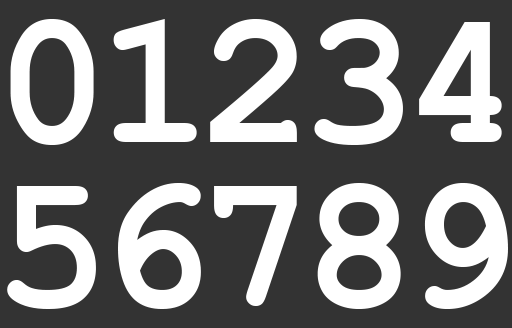
<style>
.page{position:relative;width:512px;height:328px;background:#333333}
.page>*{position:absolute;margin:0}
.t1{font:190px "CourierNewPS-BoldMT";color:#ffffff}
</style>
<div class="page">
<p class="t1" style="left:10px;top:19px;width:84px;height:126px">0</p>
<p class="t1" style="left:113px;top:19px;width:84px;height:123px">1</p>
<p class="t1" style="left:210px;top:19px;width:87px;height:123px">2</p>
<p class="t1" style="left:314px;top:19px;width:89px;height:126px">3</p>
<p class="t1" style="left:419px;top:22px;width:83px;height:120px">4</p>
<p class="t1" style="left:118px;top:183px;width:83px;height:126px">6</p>
<p class="t1" style="left:317px;top:183px;width:84px;height:126px">8</p>
<p class="t1" style="left:424px;top:183px;width:84px;height:126px">9</p>
<p class="t1" style="left:7px;top:186px;width:89px;height:123px">5</p>
<p class="t1" style="left:214px;top:186px;width:83px;height:120px">7</p>
</div>
